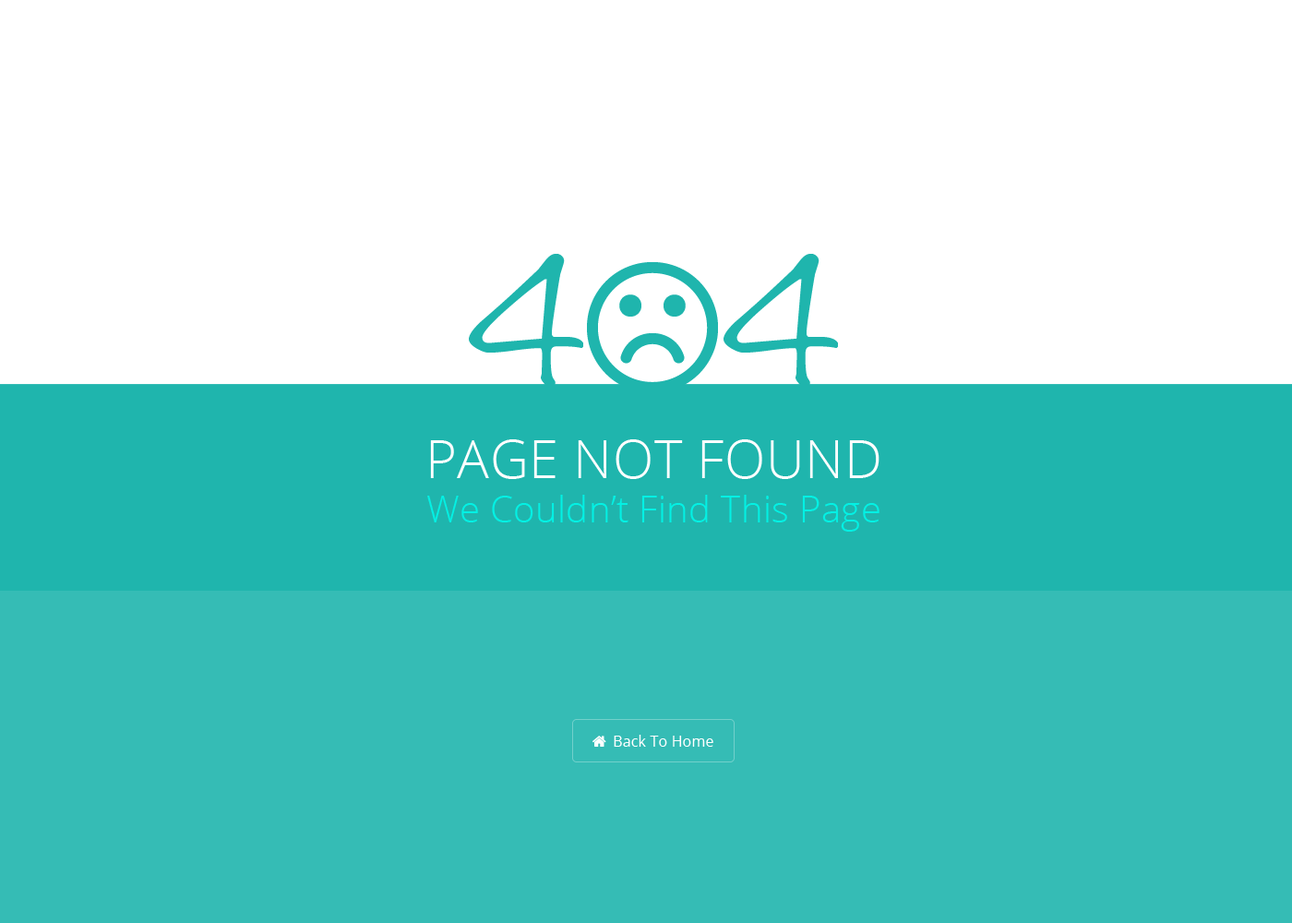
<style>
.page{position:relative;width:1292px;height:923px;background:#ffffff}
.page>*{position:absolute;margin:0}
.t1{font:36.9px "OpenSans-Light";letter-spacing:0.01em;color:#03f1e4}
.t2{font:53.5px "OpenSans-Light";letter-spacing:0.01em;color:#ffffff;text-transform:uppercase}
</style>
<div class="page">
<p class="t1" style="left:427px;top:439px;width:453px;height:93px;text-align:center"><span class="t2">Page not found<br></span>We Couldn’t Find This Page</p>
</div>
